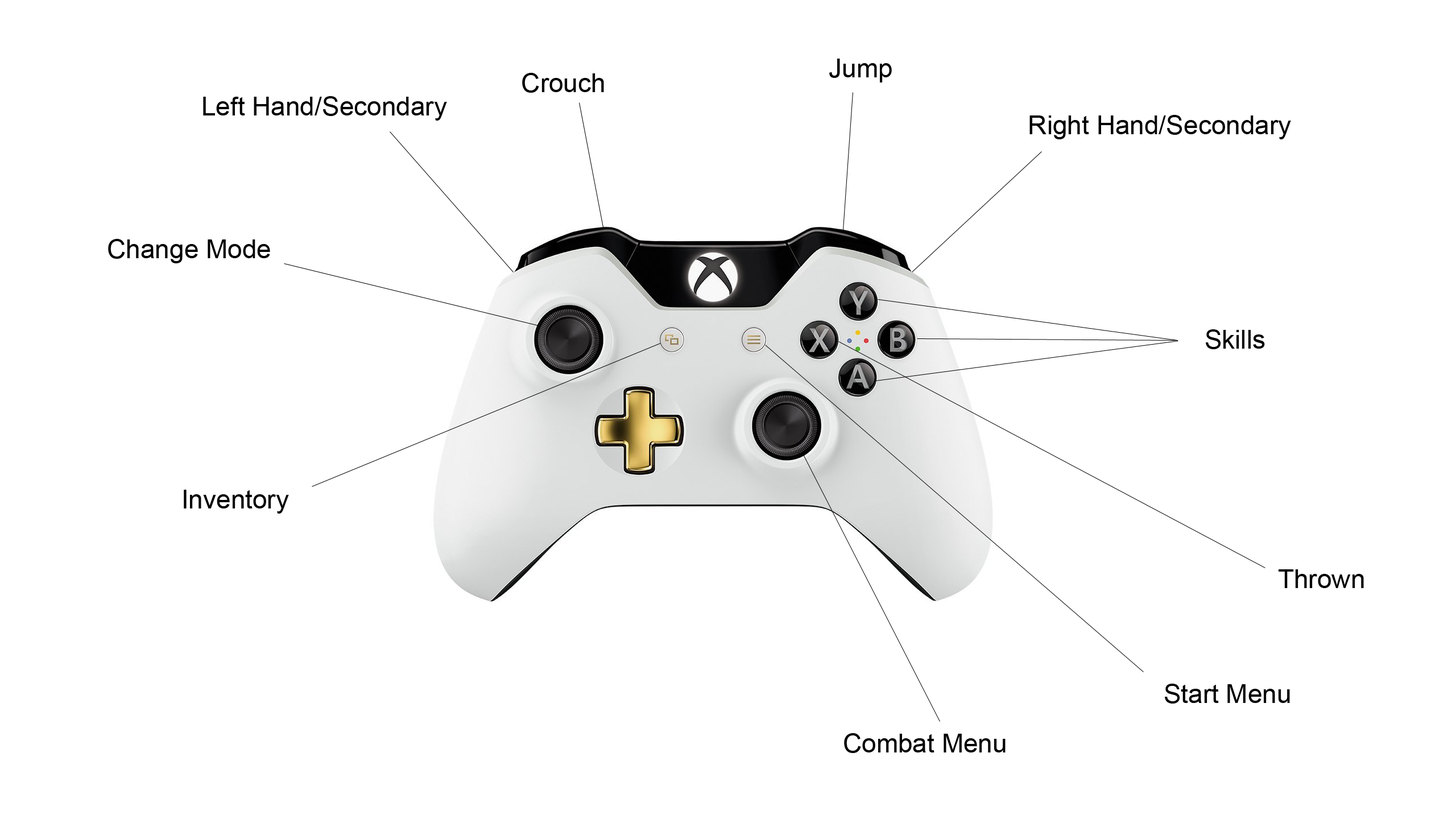
<style>
.page{position:relative;width:1456px;height:819px;background:#ffffff}
.page>*{position:absolute;margin:0}
.t1{font:26.2px "ArialMT";color:#000000}
</style>
<div class="page">
<p class="t1" style="left:829px;top:59px;width:63px;height:23px">Jump</p>
<p class="t1" style="left:522px;top:73px;width:82px;height:20px">Crouch</p>
<p class="t1" style="left:203px;top:96px;width:244px;height:25px">Left Hand/Secondary</p>
<p class="t1" style="left:1029px;top:115px;width:262px;height:24px">Right Hand/Secondary</p>
<p class="t1" style="left:108px;top:239px;width:162px;height:24px">Change Mode</p>
<p class="t1" style="left:1206px;top:329px;width:59px;height:20px">Skills</p>
<p class="t1" style="left:184px;top:490px;width:105px;height:24px">Inventory</p>
<p class="t1" style="left:1279px;top:569px;width:85px;height:19px">Thrown</p>
<p class="t1" style="left:1165px;top:684px;width:125px;height:20px">Start Menu</p>
<p class="t1" style="left:844px;top:733px;width:162px;height:20px">Combat Menu</p>
</div>
